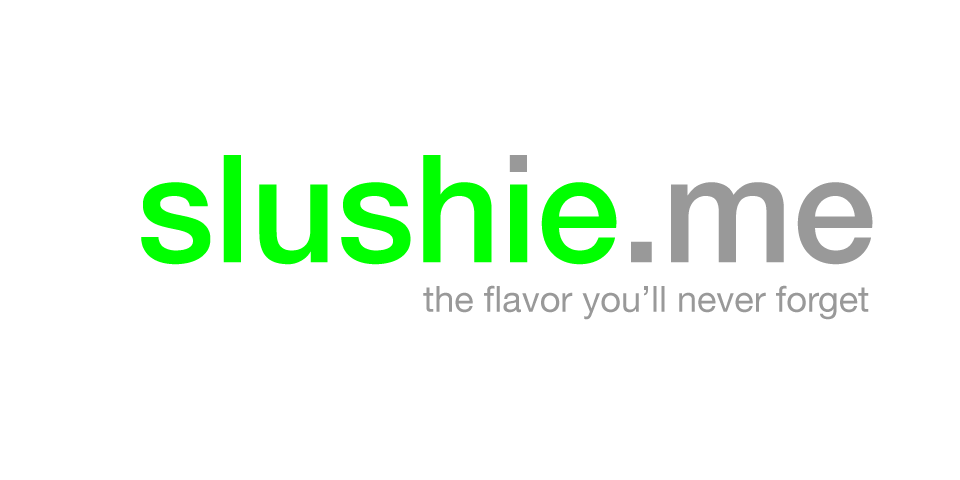
<style>
.page{position:relative;width:960px;height:480px;background:#ffffff}
.page>*{position:absolute;margin:0}
.t1{font:150px "HelveticaNeue-Medium";color:#00ff00}
.t2{font:150px "HelveticaNeue-Medium";color:#999999}
.t3{font:36px "HelveticaNeue";color:#999999}
</style>
<div class="page">
<p class="t1" style="left:141px;top:155px;width:731px;height:110px">slushie.me</p>
<p class="t2" style="left:631px;top:182px;width:242px;height:83px">.me</p>
<p class="t3" style="left:423px;top:285px;width:446px;height:35px">the flavor you’ll never forget</p>
</div>
